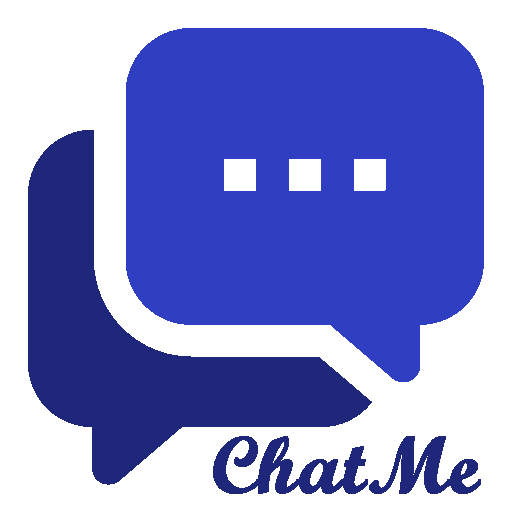
<style>
.page{position:relative;width:512px;height:512px;background:#ffffff}
.page>*{position:absolute;margin:0}
.t1{font:80px "ScriptMTBold";color:#1e2779;font-weight:bold}
</style>
<div class="page">
<p class="t1" style="left:213px;top:436px;width:268px;height:58px">ChatMe</p>
</div>
